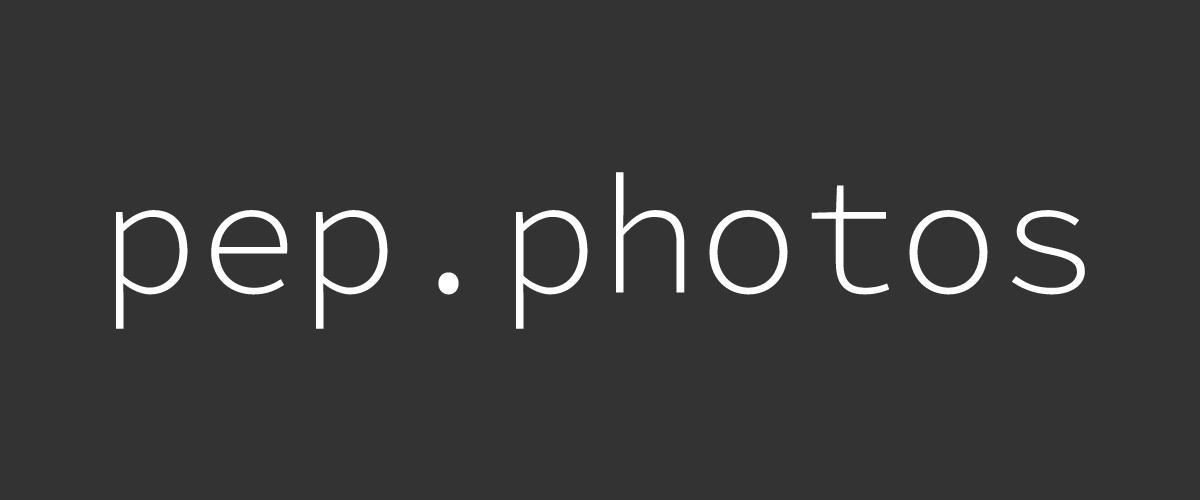
<style>
.page{position:relative;width:1200px;height:500px;background:#333333}
.page>*{position:absolute;margin:0}
.t1{font:166.7px "SourceCodePro-Light";color:#ffffff}
</style>
<div class="page">
<p class="t1" style="left:116px;top:172px;width:969px;height:157px">pep.photos</p>
</div>
